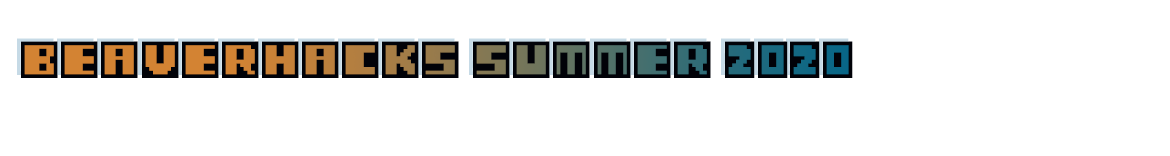
<style>
.page{position:relative;width:1170px;height:156px;background:#ffffff}
.page>*{position:absolute;margin:0}
.t1{font:58.3px "PixelCards";color:#010208}
</style>
<div class="page">
<p class="t1" style="left:21px;top:41px;width:832px;height:37px">Beaverhacks Summer 2020</p>
</div>
